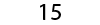
<style>
.page{position:relative;width:100px;height:25px;background:#ffffff}
.page>*{position:absolute;margin:0}
.t1{font:24px "MyriadPro-Regular";color:#000000}
</style>
<div class="page">
<p class="t1" style="left:40px;top:4px;width:21px;height:16px">15</p>
</div>
